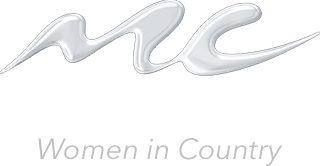
<style>
.page{position:relative;width:320px;height:166px;background:#ffffff}
.page>*{position:absolute;margin:0}
.t1{font:29px "AvenirNextLTPro-It";color:#bfbfbf}
</style>
<div class="page">
<p class="t1" style="left:38px;top:138px;width:245px;height:28px">Women in Country</p>
</div>
